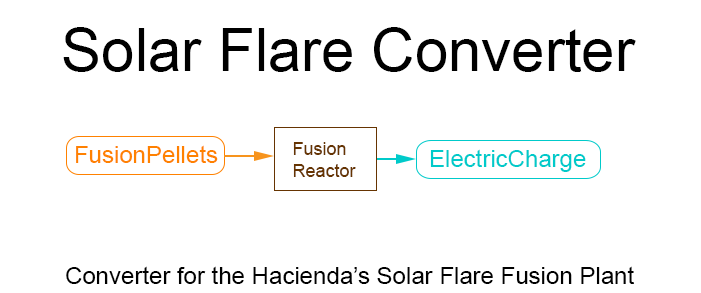
<style>
.page{position:relative;width:701px;height:293px;background:#ffffff}
.page>*{position:absolute;margin:0}
.t1{font:60px "ArialMT";color:#000000}
.t2{font:24px "ArialMT";color:#ff8100}
.t3{font:18px "ArialMT";color:#663401}
.t4{font:24px "ArialMT";color:#00caca}
.t5{font:24px "ArialMT";color:#000000}
</style>
<div class="page">
<p class="t1" style="left:63px;top:27px;width:573px;height:45px">Solar Flare Converter</p>
<p class="t2" style="left:76px;top:145px;width:142px;height:18px">FusionPellets</p>
<p class="t3" style="left:293px;top:142px;width:63px;height:35px">Fusion<br>Reactor</p>
<p class="t4" style="left:430px;top:149px;width:156px;height:23px">ElectricCharge</p>
<p class="t5" style="left:66px;top:266px;width:568px;height:18px">Converter for the Hacienda’s Solar Flare Fusion Plant</p>
</div>
